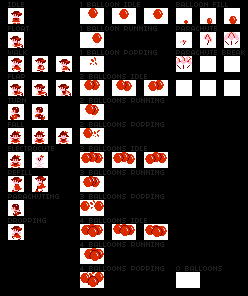
<style>
.page{position:relative;width:248px;height:296px;background:#000000}
.page>*{position:absolute;margin:0}
.t1{font:10px "04b03-Ekstended";color:#222222;text-transform:uppercase}
</style>
<div class="page">
<p class="t1" style="left:8px;top:2px;width:16px;height:5px">idle</p>
<p class="t1" style="left:80px;top:2px;width:60px;height:5px">1 balloon idle</p>
<p class="t1" style="left:176px;top:2px;width:52px;height:5px">balloon fill</p>
<p class="t1" style="left:8px;top:26px;width:21px;height:5px">float</p>
<p class="t1" style="left:80px;top:26px;width:77px;height:5px">1 balloon running</p>
<p class="t1" style="left:176px;top:26px;width:41px;height:5px">parachute</p>
<p class="t1" style="left:8px;top:50px;width:19px;height:5px">walk</p>
<p class="t1" style="left:80px;top:50px;width:77px;height:5px">1 balloon popping</p>
<p class="t1" style="left:176px;top:50px;width:69px;height:5px">parachute break</p>
<p class="t1" style="left:8px;top:74px;width:17px;height:5px">flap</p>
<p class="t1" style="left:80px;top:74px;width:67px;height:5px">2 balloons idle</p>
<p class="t1" style="left:8px;top:98px;width:18px;height:5px">turn</p>
<p class="t1" style="left:80px;top:98px;width:84px;height:5px">2 balloons running</p>
<p class="t1" style="left:8px;top:122px;width:16px;height:5px">fall</p>
<p class="t1" style="left:80px;top:122px;width:84px;height:5px">2 balloons popping</p>
<p class="t1" style="left:8px;top:146px;width:46px;height:5px">electrocute</p>
<p class="t1" style="left:80px;top:146px;width:67px;height:5px">3 balloons idle</p>
<p class="t1" style="left:8px;top:170px;width:24px;height:5px">refill</p>
<p class="t1" style="left:80px;top:170px;width:84px;height:5px">3 balloons running</p>
<p class="t1" style="left:8px;top:194px;width:51px;height:5px">Parachuting</p>
<p class="t1" style="left:80px;top:194px;width:84px;height:5px">3 balloons popping</p>
<p class="t1" style="left:8px;top:218px;width:38px;height:5px">dropping</p>
<p class="t1" style="left:80px;top:218px;width:67px;height:5px">4 balloons idle</p>
<p class="t1" style="left:80px;top:242px;width:84px;height:5px">4 balloons running</p>
<p class="t1" style="left:80px;top:266px;width:84px;height:5px">4 balloons popping</p>
<p class="t1" style="left:176px;top:266px;width:46px;height:5px">0 balloons</p>
</div>
